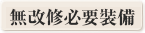
<style>
.page{position:relative;width:145px;height:33px;background:#efe6dc}
.page>*{position:absolute;margin:0}
.t1{font:18px "RyuminPr6N-ExBold";color:#2b2b2b}
</style>
<div class="page">
<p class="t1" style="left:9px;top:8px;width:126px;height:18px">無改修必要裝備</p>
</div>
